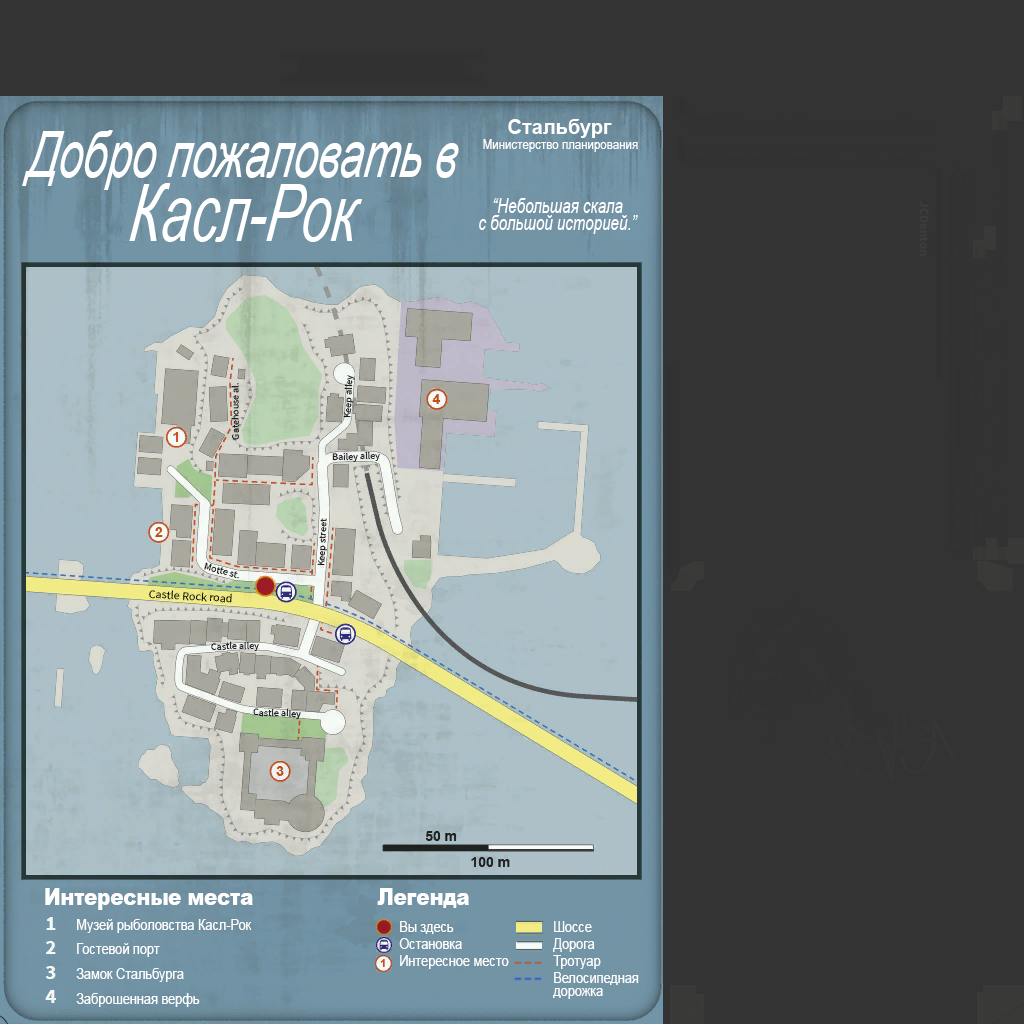
<style>
.page{position:relative;width:1024px;height:1024px;background:#333333}
.page>*{position:absolute;margin:0}
.t1{font:20px "Arial-BoldMT";color:#ffffff}
.t2{font:64px/64px "Arial-ItalicMT";color:#ffffff;font-style:italic;scale:0.68 1}
.t3{font:79px/64px "Arial-ItalicMT";color:#ffffff;font-style:italic;scale:0.68 1}
.t4{font:14px "ArialNarrow";color:#ffffff}
.t5{font:19.6px/17px "Arial-ItalicMT";color:#ffffff;scale:0.77 1}
.t6{font:23px "Arial-Black";color:#ffffff;scale:0.85 1}
.t7{font:15px/24px "ArialMT";color:#ffffff;scale:0.85 1}
.t8{font:15px/25px "ArialMT";color:#ffffff;scale:0.85 1}
.t9{font:15px/17px "ArialMT";color:#ffffff;scale:0.85 1}
.t10{font:15px/13px "ArialMT";color:#ffffff;scale:0.85 1}
</style>
<div class="page">
<p class="t1" style="left:508px;top:119px;width:104px;height:19px">Стальбург</p>
<p class="t2" style="left:22px;top:130px;width:437px;height:112px;text-align:center">Добро пожаловать в<br><span class="t3">Касл-Рок</span></p>
<p class="t4" style="left:483px;top:139px;width:155px;height:13px">Министерство планирования</p>
<p class="t5" style="left:479px;top:198px;width:159px;height:36px;text-align:center">“Небольшая скала<br>с большой историей.”</p>
<p class="t6" style="left:45px;top:888px;width:208px;height:22px">Интересные места</p>
<p class="t6" style="left:377px;top:888px;width:92px;height:20px">Легенда</p>
<p class="t7" style="left:76px;top:919px;width:176px;height:88px">Музей рыболовства Касл-Рок<br>Гостевой порт<br><span class="t8">Замок Стальбурга<br>Заброшенная верфь</span></p>
<p class="t9" style="left:399px;top:921px;width:110px;height:48px">Вы здесь<br>Остановка<br>Интересное место</p>
<p class="t9" style="left:553px;top:921px;width:86px;height:78px">Шоссе<br>Дорога<br>Тротуар<br>Велосипедная<br><span class="t10">дорожка</span></p>
</div>
